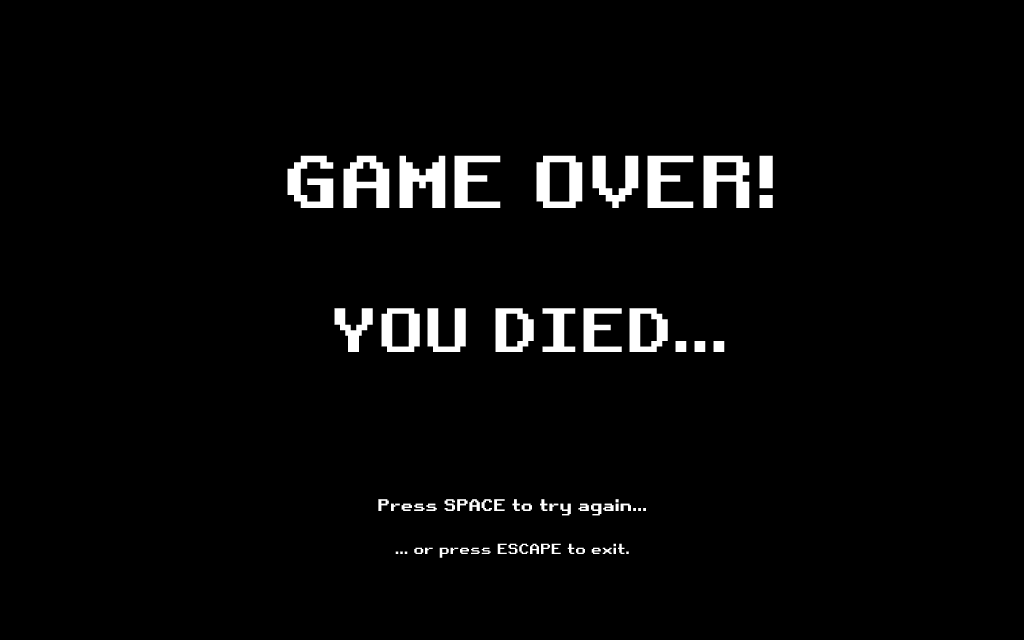
<style>
.page{position:relative;width:1024px;height:640px;background:#000000}
.page>*{position:absolute;margin:0}
.t1{font:60px "RetroGaming";color:#ffffff}
.t2{font:72px "RetroGaming";color:#ffffff}
.t3{font:16px "RetroGaming";color:#ffffff}
.t4{font:14px "RetroGaming";color:#ffffff}
</style>
<div class="page">
<p class="t1" style="left:287px;top:155px;width:486px;height:197px;text-align:center"><span class="t2">GAME OVER!<br></span><br>YOU DIED...</p>
<p class="t3" style="left:378px;top:499px;width:268px;height:17px">Press SPACE to try again...</p>
<p class="t4" style="left:395px;top:543px;width:234px;height:15px">... or press ESCAPE to exit.</p>
</div>
